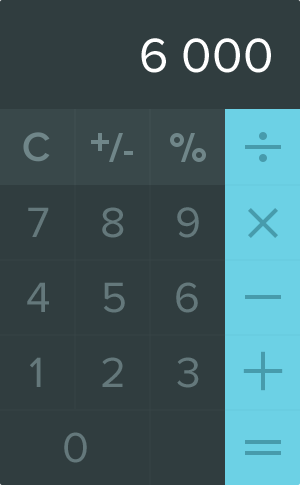
<style>
.page{position:relative;width:300px;height:485px;background:#303d3f}
.page>*{position:absolute;margin:0}
.t1{font:50px "ProximaNova-Regular";color:#ffffff}
.t2{font:44px "ProximaNova-Regular";color:#64787b}
</style>
<div class="page">
<p class="t1" style="left:141px;top:38px;width:130px;height:35px">6 000</p>
<p class="t2" style="left:28px;top:207px;width:21px;height:30px">7</p>
<p class="t2" style="left:102px;top:207px;width:22px;height:31px">8</p>
<p class="t2" style="left:177px;top:207px;width:22px;height:31px">9</p>
<p class="t2" style="left:27px;top:282px;width:22px;height:30px">4</p>
<p class="t2" style="left:103px;top:282px;width:22px;height:31px">5</p>
<p class="t2" style="left:176px;top:282px;width:22px;height:31px">6</p>
<p class="t2" style="left:30px;top:357px;width:11px;height:30px">1</p>
<p class="t2" style="left:102px;top:357px;width:21px;height:30px">2</p>
<p class="t2" style="left:177px;top:357px;width:22px;height:31px">3</p>
<p class="t2" style="left:64px;top:432px;width:23px;height:31px">0</p>
</div>
